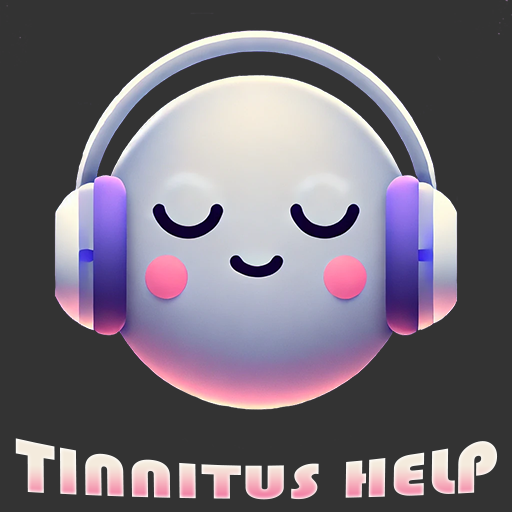
<style>
.page{position:relative;width:512px;height:512px;background:#333333}
.page>*{position:absolute;margin:0}
.t1{font:79px "Bauhaus93"}
</style>
<div class="page">
<p class="t1" style="left:15px;top:438px;width:483px;height:62px">TINNITUS HELP</p>
</div>
